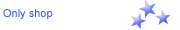
<style>
.page{position:relative;width:180px;height:30px;background:#ffffff}
.page>*{position:absolute;margin:0}
.t1{font:11px "ArialMT";color:#3657f7}
</style>
<div class="page">
<p class="t1" style="left:3px;top:9px;width:50px;height:11px">Only shop</p>
</div>
